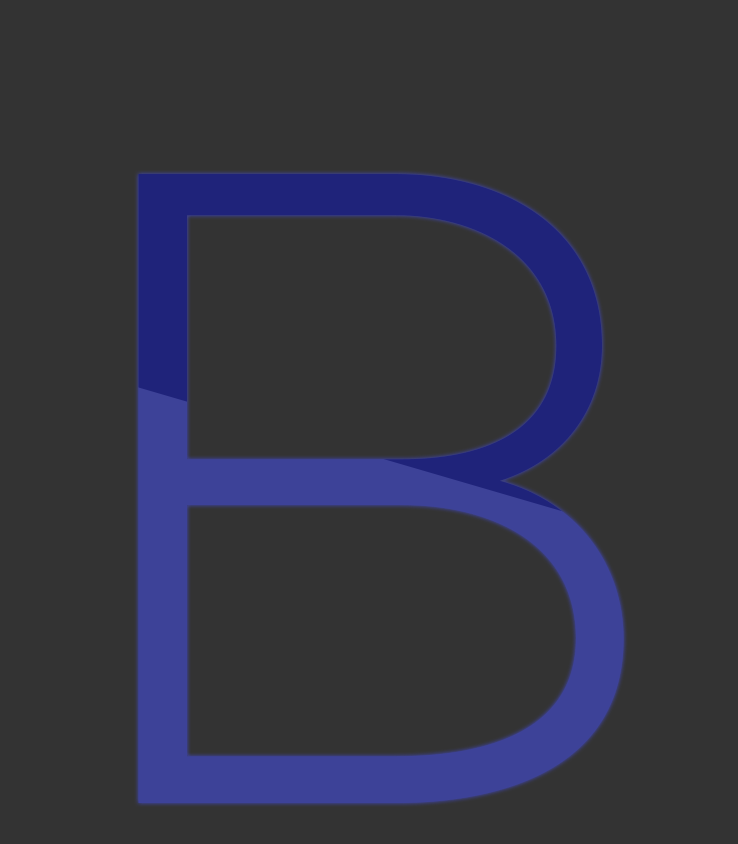
<style>
.page{position:relative;width:738px;height:844px;background:#333333}
.page>*{position:absolute;margin:0}
.t1{font:897.6px "NexaLight"}
</style>
<div class="page">
<p class="t1" style="left:138px;top:174px;width:486px;height:629px">B</p>
</div>
